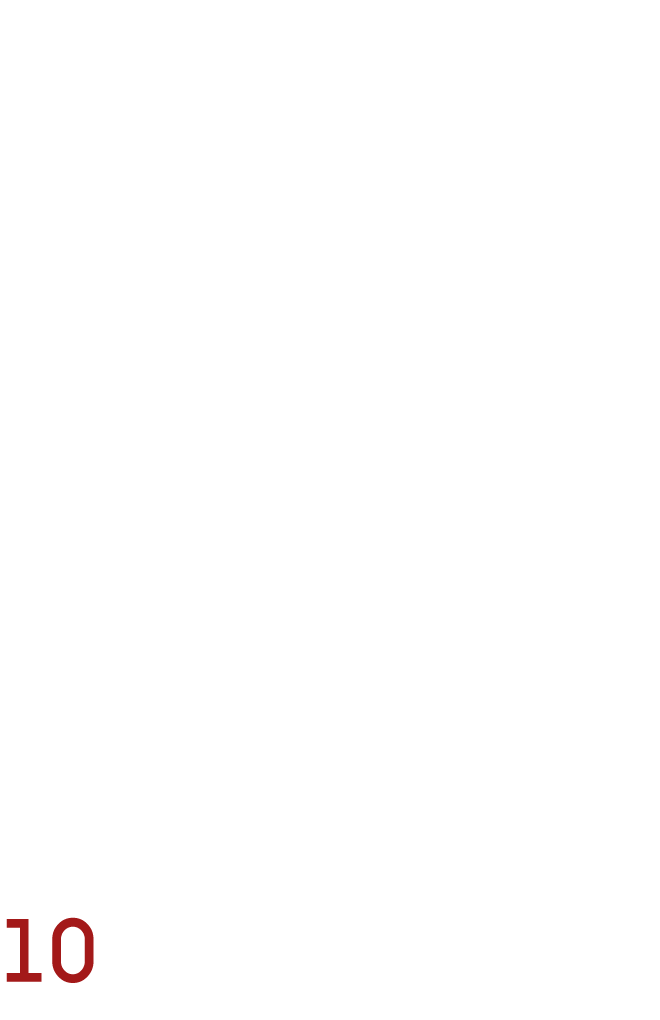
<style>
.page{position:relative;width:660px;height:1020px;background:#ffffff}
.page>*{position:absolute;margin:0}
.t1{font:75px "CardCharacters";color:#a31919}
</style>
<div class="page">
<p class="t1" style="left:6px;top:917px;width:88px;height:66px">10</p>
</div>
